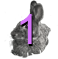
<style>
.page{position:relative;width:58px;height:59px;background:#ffffff}
.page>*{position:absolute;margin:0}
.t1{font:41.7px "ArialMT";color:#d576f8}
</style>
<div class="page">
<p class="t1" style="left:20px;top:14px;width:12px;height:30px">1</p>
</div>
